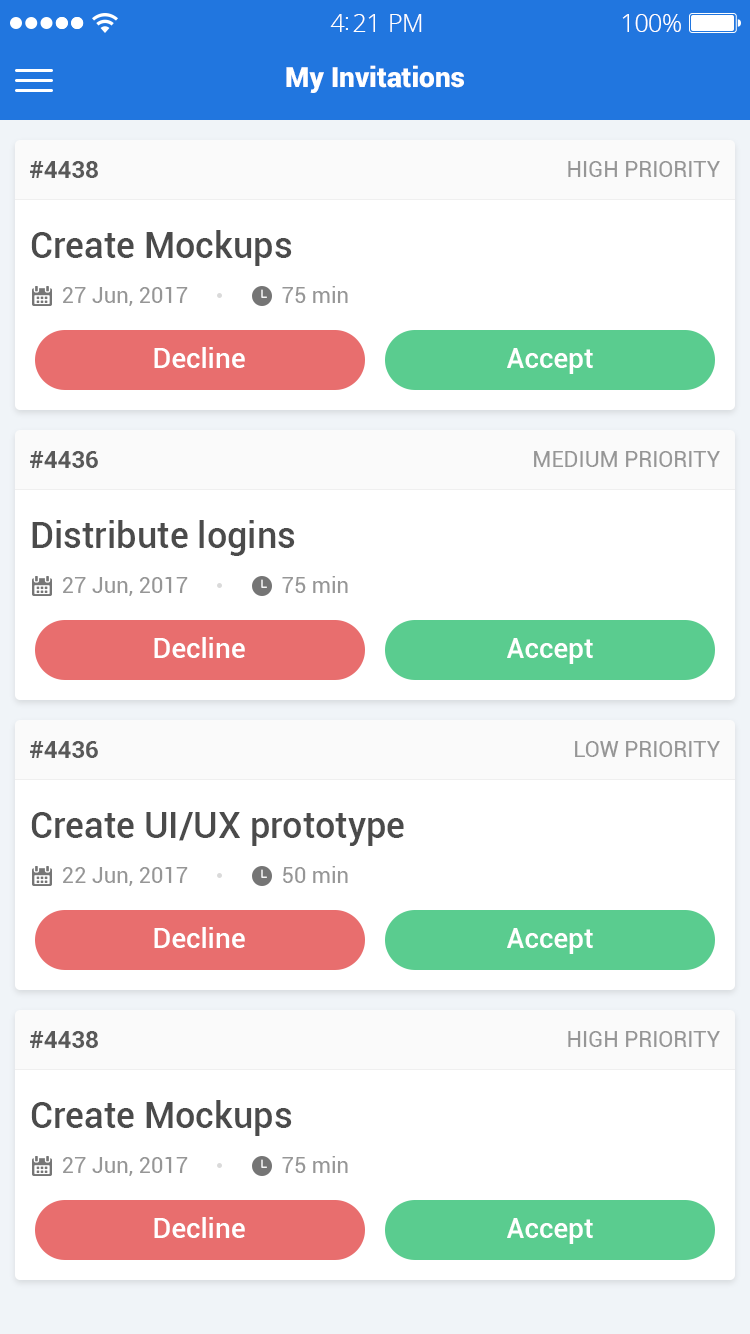
<style>
.page{position:relative;width:750px;height:1334px;background:#ffffff}
.page>*{position:absolute;margin:0}
.t1{font:25px "OpenSans-Light";letter-spacing:-0.02em;color:#ffffff}
.t2{font:28px "Roboto-Black";color:#ffffff}
.t3{font:24px "Roboto-Bold";color:#595959;text-transform:uppercase}
.t4{font:22px "Roboto-Regular";color:#969696;text-transform:uppercase}
.t5{font:36px "Roboto-Medium";color:#4b4b4b}
.t6{font:22px "Roboto-Regular";color:#969696}
.t7{font:28px "Roboto-Medium";color:#ffffff}
</style>
<div class="page">
<p class="t1" style="left:330px;top:14px;width:92px;height:18px">4:21 PM</p>
<p class="t1" style="left:622px;top:14px;width:59px;height:18px">100%</p>
<p class="t2" style="left:286px;top:65px;width:178px;height:28px">My Invitations</p>
<p class="t3" style="left:30px;top:161px;width:68px;height:17px">#4438</p>
<p class="t4" style="left:568px;top:161px;width:152px;height:16px">high Priority</p>
<p class="t5" style="left:31px;top:230px;width:261px;height:36px">Create Mockups</p>
<p class="t6" style="left:63px;top:287px;width:125px;height:19px">27 Jun, 2017</p>
<p class="t6" style="left:282px;top:286px;width:66px;height:17px">75 min</p>
<p class="t7" style="left:154px;top:347px;width:91px;height:21px">Decline</p>
<p class="t7" style="left:507px;top:348px;width:86px;height:26px">Accept</p>
<p class="t3" style="left:30px;top:451px;width:68px;height:17px">#4436</p>
<p class="t4" style="left:534px;top:451px;width:186px;height:16px">Medium Priority</p>
<p class="t5" style="left:32px;top:520px;width:263px;height:36px">Distribute logins</p>
<p class="t6" style="left:63px;top:577px;width:125px;height:19px">27 Jun, 2017</p>
<p class="t6" style="left:282px;top:576px;width:66px;height:17px">75 min</p>
<p class="t7" style="left:154px;top:637px;width:91px;height:21px">Decline</p>
<p class="t7" style="left:507px;top:638px;width:86px;height:26px">Accept</p>
<p class="t3" style="left:30px;top:741px;width:68px;height:17px">#4436</p>
<p class="t4" style="left:575px;top:741px;width:145px;height:16px">Low Priority</p>
<p class="t5" style="left:31px;top:812px;width:373px;height:34px">Create UI/UX prototype</p>
<p class="t6" style="left:63px;top:867px;width:125px;height:19px">22 Jun, 2017</p>
<p class="t6" style="left:283px;top:866px;width:65px;height:17px">50 min</p>
<p class="t7" style="left:154px;top:927px;width:91px;height:21px">Decline</p>
<p class="t7" style="left:507px;top:928px;width:86px;height:26px">Accept</p>
<p class="t3" style="left:30px;top:1031px;width:68px;height:17px">#4438</p>
<p class="t4" style="left:568px;top:1031px;width:152px;height:16px">high Priority</p>
<p class="t5" style="left:31px;top:1100px;width:261px;height:36px">Create Mockups</p>
<p class="t6" style="left:63px;top:1157px;width:125px;height:19px">27 Jun, 2017</p>
<p class="t6" style="left:282px;top:1156px;width:66px;height:17px">75 min</p>
<p class="t7" style="left:154px;top:1217px;width:91px;height:21px">Decline</p>
<p class="t7" style="left:507px;top:1218px;width:86px;height:26px">Accept</p>
</div>
